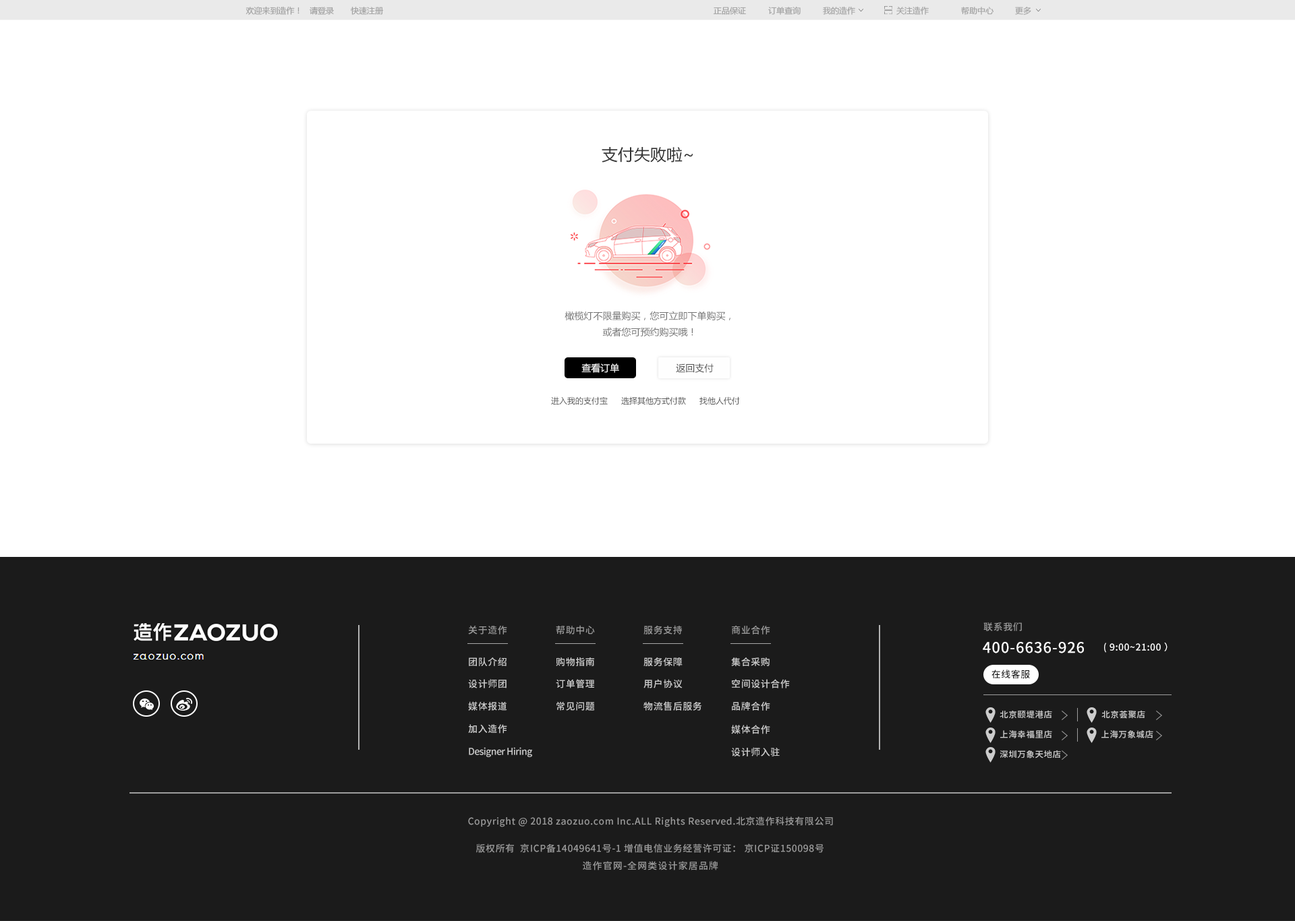
<style>
.page{position:relative;width:1295px;height:921px;background:#ffffff}
.page>*{position:absolute;margin:0}
.t1{font:8px "MicrosoftYaHei";color:#9f9f9f;text-transform:uppercase}
.t2{font:15.9px "MicrosoftYaHei";color:#333333}
.t3{font:9.3px "MicrosoftYaHei";color:#737373}
.t4{font:9.3px "MicrosoftYaHei";color:#ffffff}
.t5{font:9.3px "MicrosoftYaHei";color:#535353}
.t6{font:8.1px "MicrosoftYaHei";color:#535353}
.t7{font:9.3px "SourceHanSansCN-Medium";letter-spacing:0.04em;color:#999999}
.t8{font:14.6px "SourceHanSansCN-Medium";letter-spacing:0.04em;color:#ffffff}
.t9{font:9.2px "SourceHanSansCN-Medium";letter-spacing:0.04em;color:#ffffff}
.t10{font:9.3px "SourceHanSansCN-Medium";letter-spacing:0.04em;color:#cccccc}
.t11{font:9.3px "SourceHanSansCN-Medium";letter-spacing:0.04em;color:#1b1b1b}
.t12{font:8.3px "SourceHanSansCN-Medium";letter-spacing:0.04em;color:#cccccc}
.t13{font:9.3px "SourceHanSansCN-Medium";letter-spacing:-0.04em;color:#cccccc}
.t14{font:9.3px "SourceHanSansCN-Medium";letter-spacing:0.08em;color:#999999}
</style>
<div class="page">
<p class="t1" style="left:245px;top:6px;width:139px;height:9px">欢迎来到造作！   请登录       快速注册</p>
<p class="t1" style="left:713px;top:7px;width:33px;height:8px">正品保证</p>
<p class="t1" style="left:768px;top:6px;width:32px;height:9px">订单查询</p>
<p class="t1" style="left:823px;top:6px;width:32px;height:9px">我的造作</p>
<p class="t1" style="left:896px;top:6px;width:32px;height:9px">关注造作</p>
<p class="t1" style="left:961px;top:7px;width:32px;height:8px">帮助中心</p>
<p class="t1" style="left:1015px;top:7px;width:16px;height:8px">更多</p>
<p class="t2" style="left:601px;top:147px;width:92px;height:16px">支付失败啦~</p>
<p class="t3" style="left:564px;top:311px;width:166px;height:26px;text-align:center">橄榄灯不限量购买，您可立即下单购买，<br>或者您可预约购买哦！</p>
<p class="t4" style="left:581px;top:363px;width:38px;height:10px">查看订单</p>
<p class="t5" style="left:676px;top:363px;width:37px;height:10px">返回支付</p>
<p class="t6" style="left:551px;top:396px;width:57px;height:9px">进入我的支付宝</p>
<p class="t6" style="left:621px;top:396px;width:65px;height:9px">选择其他方式付款</p>
<p class="t6" style="left:699px;top:396px;width:41px;height:9px">找他人代付</p>
<p class="t7" style="left:468px;top:626px;width:39px;height:8px">关于造作</p>
<p class="t7" style="left:556px;top:625px;width:39px;height:9px">帮助中心</p>
<p class="t7" style="left:643px;top:625px;width:39px;height:9px">服务支持</p>
<p class="t7" style="left:732px;top:625px;width:38px;height:9px">商业合作</p>
<p class="t7" style="left:983px;top:622px;width:39px;height:9px">联系我们</p>
<p class="t8" style="left:982px;top:642px;width:102px;height:11px">400-6636-926</p>
<p class="t9" style="left:1104px;top:643px;width:63px;height:10px">( 9:00~21:00 ）</p>
<p class="t10" style="left:469px;top:657px;width:37px;height:9px">团队介绍</p>
<p class="t10" style="left:556px;top:657px;width:38px;height:9px">购物指南</p>
<p class="t10" style="left:643px;top:657px;width:39px;height:9px">服务保障</p>
<p class="t10" style="left:731px;top:657px;width:38px;height:9px">集合采购</p>
<p class="t11" style="left:991px;top:670px;width:39px;height:9px">在线客服</p>
<p class="t10" style="left:468px;top:679px;width:38px;height:9px">设计师团</p>
<p class="t10" style="left:556px;top:679px;width:38px;height:9px">订单管理</p>
<p class="t10" style="left:643px;top:679px;width:39px;height:9px">用户协议</p>
<p class="t10" style="left:732px;top:679px;width:58px;height:9px">空间设计合作</p>
<p class="t10" style="left:468px;top:701px;width:39px;height:10px">媒体报道</p>
<p class="t10" style="left:556px;top:702px;width:39px;height:9px">常见问题</p>
<p class="t10" style="left:643px;top:701px;width:59px;height:10px">物流售后服务</p>
<p class="t10" style="left:732px;top:701px;width:38px;height:10px">品牌合作</p>
<p class="t12" style="left:999px;top:710px;width:53px;height:9px">北京颐堤港店</p>
<p class="t12" style="left:1101px;top:710px;width:44px;height:9px">北京荟聚店</p>
<p class="t10" style="left:468px;top:724px;width:39px;height:10px">加入造作</p>
<p class="t10" style="left:731px;top:725px;width:39px;height:9px">媒体合作</p>
<p class="t12" style="left:1000px;top:730px;width:52px;height:8px">上海幸福里店</p>
<p class="t12" style="left:1101px;top:730px;width:52px;height:8px">上海万象城店</p>
<p class="t13" style="left:469px;top:747px;width:63px;height:10px">Designer Hiring</p>
<p class="t10" style="left:731px;top:747px;width:48px;height:10px">设计师入驻</p>
<p class="t12" style="left:999px;top:750px;width:62px;height:9px">深圳万象天地店</p>
<p class="t7" style="left:468px;top:817px;width:365px;height:10px">Copyright @ 2018 zaozuo.com Inc.ALL Rights Reserved.北京造作科技有限公司</p>
<p class="t7" style="left:476px;top:844px;width:347px;height:9px">版权所有  京ICP备14049641号-1 增值电信业务经营许可证： 京ICP证150098号</p>
<p class="t14" style="left:583px;top:861px;width:135px;height:9px">造作官网-全网类设计家居品牌</p>
</div>
